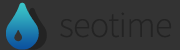
<style>
.page{position:relative;width:180px;height:50px;background:#333333}
.page>*{position:absolute;margin:0}
.t1{font:36.2px "SourceSansPro-Light";letter-spacing:-0.02em;color:#232323}
</style>
<div class="page">
<p class="t1" style="left:60px;top:12px;width:112px;height:26px">seotime</p>
</div>
